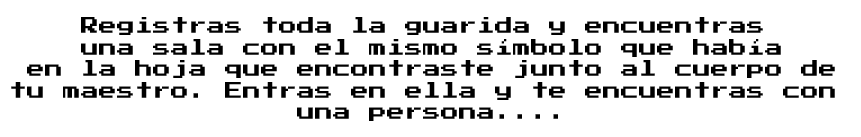
<style>
.page{position:relative;width:861px;height:137px;background:#ffffff}
.page>*{position:absolute;margin:0}
.t1{font:18px "PressStart2P";color:#000000}
</style>
<div class="page">
<p class="t1" style="left:11px;top:17px;width:824px;height:104px;text-align:center">Registras toda la guarida y encuentras <br>una sala con el mismo símbolo que había<br> en la hoja que encontraste junto al cuerpo de <br>tu maestro. Entras en ella y te encuentras con <br>una persona....</p>
</div>
